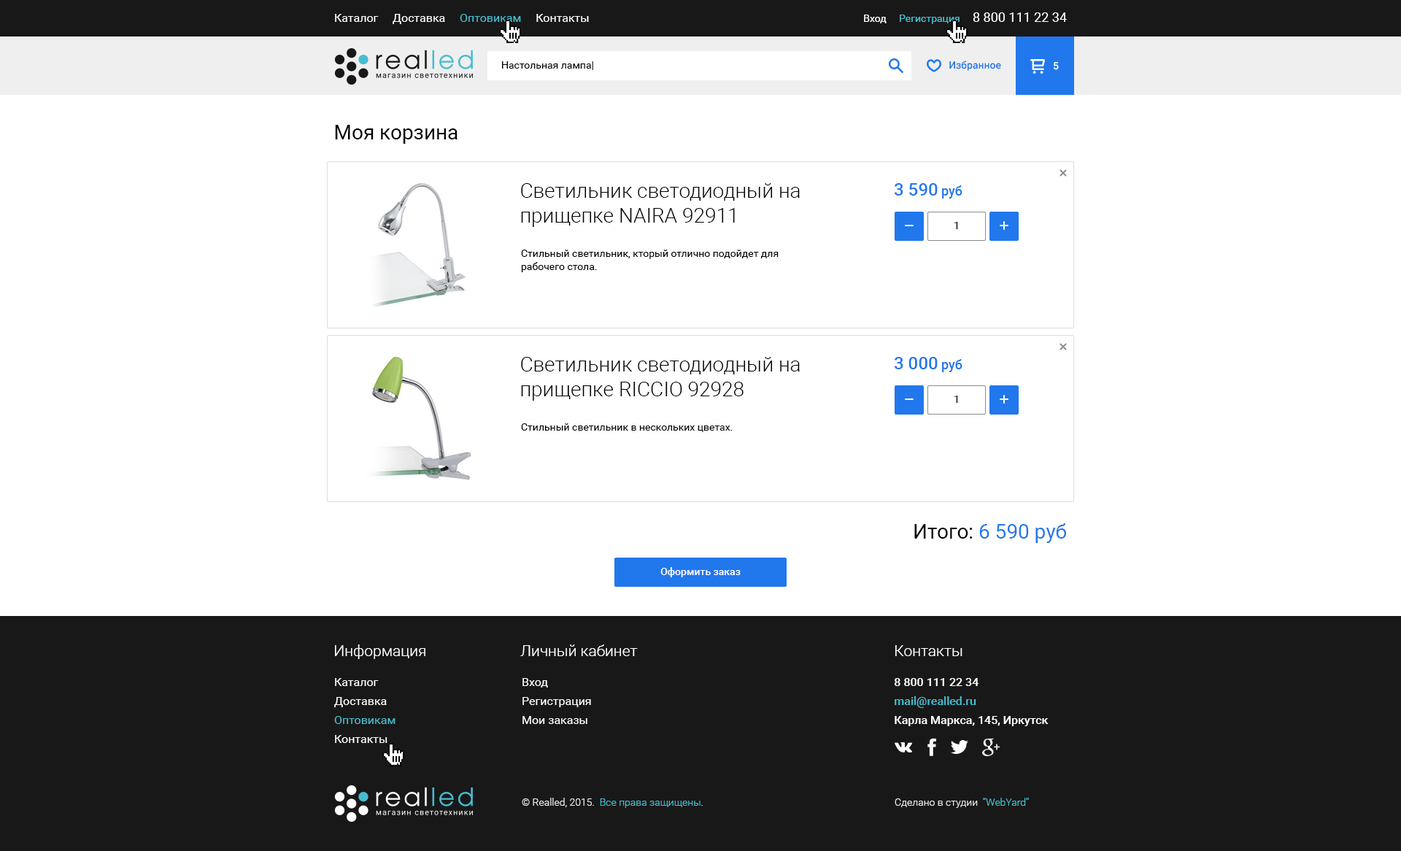
<style>
.page{position:relative;width:1401px;height:851px;background:#ffffff}
.page>*{position:absolute;margin:0}
.t1{font:11.7px "Roboto-Regular";color:#ffffff}
.t2{font:11.7px "Roboto-Regular";color:#47bdcf}
.t3{font:13.1px "Roboto-Regular";color:#ffffff}
.t4{font:10.2px "Roboto-Regular";color:#ffffff}
.t5{font:10.2px "Roboto-Regular";color:#47bdcf}
.t6{font:10.2px "Roboto-Regular";color:#000000}
.t7{font:10.2px "Roboto-Medium";color:#2177ec}
.t8{font:10.2px "Roboto-Medium";color:#ffffff}
.t9{font:20.4px "Roboto-Regular";color:#000000}
.t10{font:20.4px/24.8px "Roboto-Light";color:#000000}
.t11{font:17.5px "Roboto-Medium";color:#2177ec}
.t12{font:13.1px "Roboto-Medium";color:#2177ec}
.t13{font:10.2px "Roboto-Medium";color:#181818}
.t14{font:10.2px/13.1px "Roboto-Regular";color:#000000}
.t15{font:20.4px "Roboto-Regular";color:#2177ec}
</style>
<div class="page">
<p class="t1" style="left:335px;top:14px;width:254px;height:10px">Каталог     Доставка     <span class="t2">Оптовикам</span>     Контакты</p>
<p class="t3" style="left:864px;top:12px;width:203px;height:12px"><span class="t4">Вход     </span><span class="t5">Регистрация     </span>8 800 111 22 34</p>
<p class="t6" style="left:502px;top:61px;width:91px;height:9px">Настольная лампа|</p>
<p class="t7" style="left:949px;top:61px;width:52px;height:10px">Избранное</p>
<p class="t8" style="left:1054px;top:62px;width:5px;height:8px">5</p>
<p class="t9" style="left:335px;top:125px;width:123px;height:19px">Моя корзина</p>
<p class="t10" style="left:521px;top:183px;width:279px;height:44px">Светильник светодиодный на прищепке NAIRA 92911</p>
<p class="t11" style="left:894px;top:183px;width:69px;height:16px">3 590<span class="t12"> руб</span></p>
<p class="t13" style="left:955px;top:222px;width:3px;height:7px">1</p>
<p class="t14" style="left:521px;top:250px;width:258px;height:22px">Стильный светильник, кторый отлично подойдет для рабочего стола.</p>
<p class="t10" style="left:521px;top:357px;width:279px;height:44px">Светильник светодиодный на прищепке RICCIO 92928</p>
<p class="t11" style="left:894px;top:357px;width:69px;height:15px">3 000<span class="t12"> руб</span></p>
<p class="t13" style="left:955px;top:396px;width:3px;height:7px">1</p>
<p class="t6" style="left:521px;top:423px;width:212px;height:9px">Стильный светильник в нескольких цветах.</p>
<p class="t15" style="left:914px;top:523px;width:152px;height:20px"><span class="t9">Итого: </span>6 590 руб</p>
<p class="t8" style="left:660px;top:567px;width:81px;height:10px">Оформить заказ</p>
</div>
